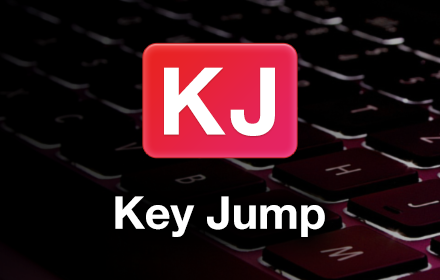
<style>
.page{position:relative;width:440px;height:280px;background:#000000}
.page>*{position:absolute;margin:0}
.t1{font:93.4px "HelveticaNeue-Bold";color:#ffffff}
.t2{font:45px "HelveticaNeue-Bold";color:#ffffff}
</style>
<div class="page">
<p class="t1" style="left:164px;top:67px;width:111px;height:69px">KJ</p>
<p class="t2" style="left:115px;top:196px;width:210px;height:41px">Key Jump</p>
</div>
